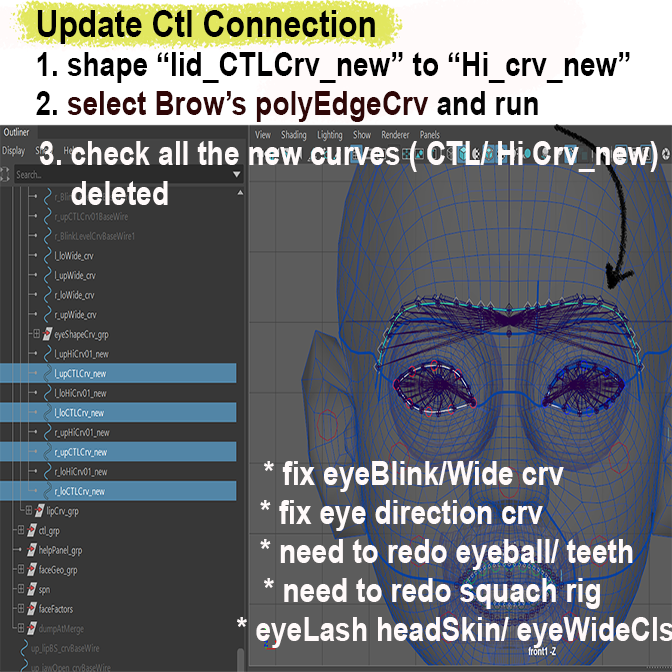
<style>
.page{position:relative;width:672px;height:672px}
.page>*{position:absolute;margin:0}
.t1{font:32.7px "Arial-BoldMT";color:#000000;scale:0.86 1}
.t2{font:36.8px "Arial-BoldMT";color:#000000;scale:0.86 1}
.t3{font:32.7px "Arial-BoldMT";color:#2f0707;scale:0.86 1}
.t4{font:32.7px "Arial-BoldMT";color:#050505;scale:0.86 1}
.t5{font:32.7px "Arial-BoldMT";color:#fffafa;scale:0.86 1}
</style>
<div class="page">
<p class="t1" style="left:36px;top:10px;width:594px;height:112px"><span class="t2">Update Ctl Connection<br></span>1. shape “lid_CTLCrv_new” to “Hi_crv_new”<br>2. <span class="t3">select Brow’s polyEdgeCrv</span><span class="t4"> and run</span></p>
<p class="t5" style="left:39px;top:141px;width:619px;height:64px">3. check all the new curves ( CTL/ Hi Crv_new)<br>    deleted</p>
<p class="t5" style="left:237px;top:461px;width:437px;height:187px">* fix eyeBlink/Wide crv <br>   * fix eye direction crv<br>   * need to redo eyeball/ teeth<br> * need to redo squach rig<br>* eyeLash headSkin/ eyeWideCls</p>
</div>
